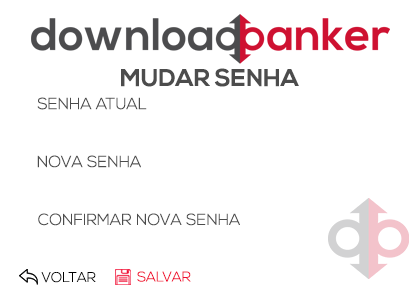
<style>
.page{position:relative;width:420px;height:290px;background:#ffffff}
.page>*{position:absolute;margin:0}
.t1{font:24px "NexaBold";color:#4c4c4c}
.t2{font:16.1px "NexaLight";color:#4c4c4c}
.t3{font:16px "NexaLight";color:#4c4c4c}
.t4{font:14px "NexaLight";color:#000000}
.t5{font:14px "NexaLight";color:#f0082e}
</style>
<div class="page">
<p class="t1" style="left:121px;top:68px;width:178px;height:19px">MUDAR SENHA</p>
<p class="t2" style="left:37px;top:97px;width:110px;height:13px">SENHA ATUAL</p>
<p class="t3" style="left:37px;top:155px;width:104px;height:13px">NOVA SENHA</p>
<p class="t3" style="left:38px;top:213px;width:202px;height:13px">CONFIRMAR NOVA SENHA</p>
<p class="t4" style="left:41px;top:272px;width:55px;height:11px">VOLTAR</p>
<p class="t5" style="left:137px;top:271px;width:54px;height:11px">SALVAR</p>
</div>
